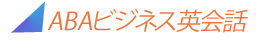
<style>
.page{position:relative;width:261px;height:46px;background:#ffffff}
.page>*{position:absolute;margin:0}
.t1{font:30.5px "KozGoPr6N-Regular";letter-spacing:0.06em;font-style:italic}
.t2{font:23.2px "KozGoPr6N-Regular";letter-spacing:0.06em;font-style:italic}
.t3{font:24.1px "KozGoPr6N-Regular";letter-spacing:0.06em;color:#ed753d;font-style:italic}
</style>
<div class="page">
<p class="t1" style="left:11px;top:1px;width:34px;height:32px;rotate:-1deg"><span class="t2"><br></span>⊿</p>
<p class="t3" style="left:47px;top:9px;width:201px;height:24px">ABAビジネス英会話</p>
</div>
